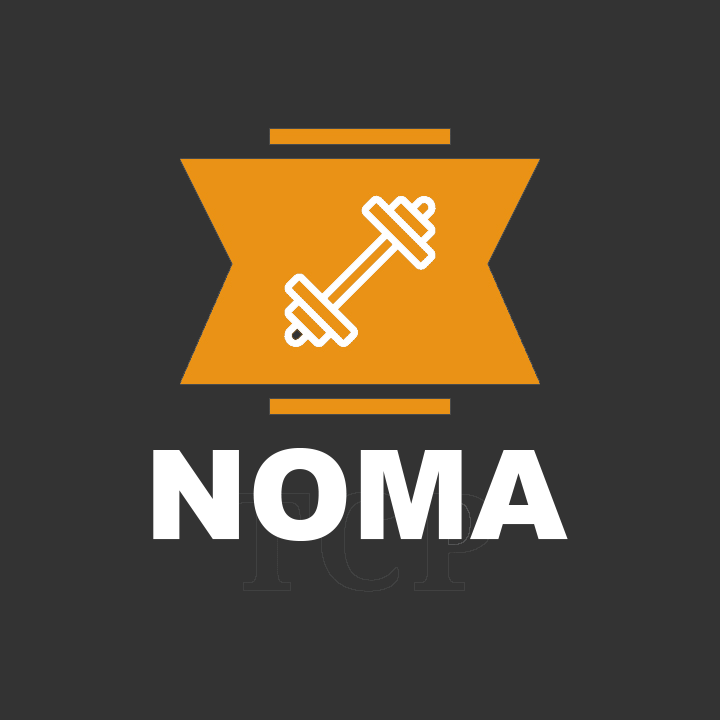
<style>
.page{position:relative;width:720px;height:720px;background:#333333}
.page>*{position:absolute;margin:0}
.t1{font:125px "Arial-Black";color:#ffffff}
</style>
<div class="page">
<p class="t1" style="left:153px;top:448px;width:415px;height:93px">NOMA</p>
</div>
